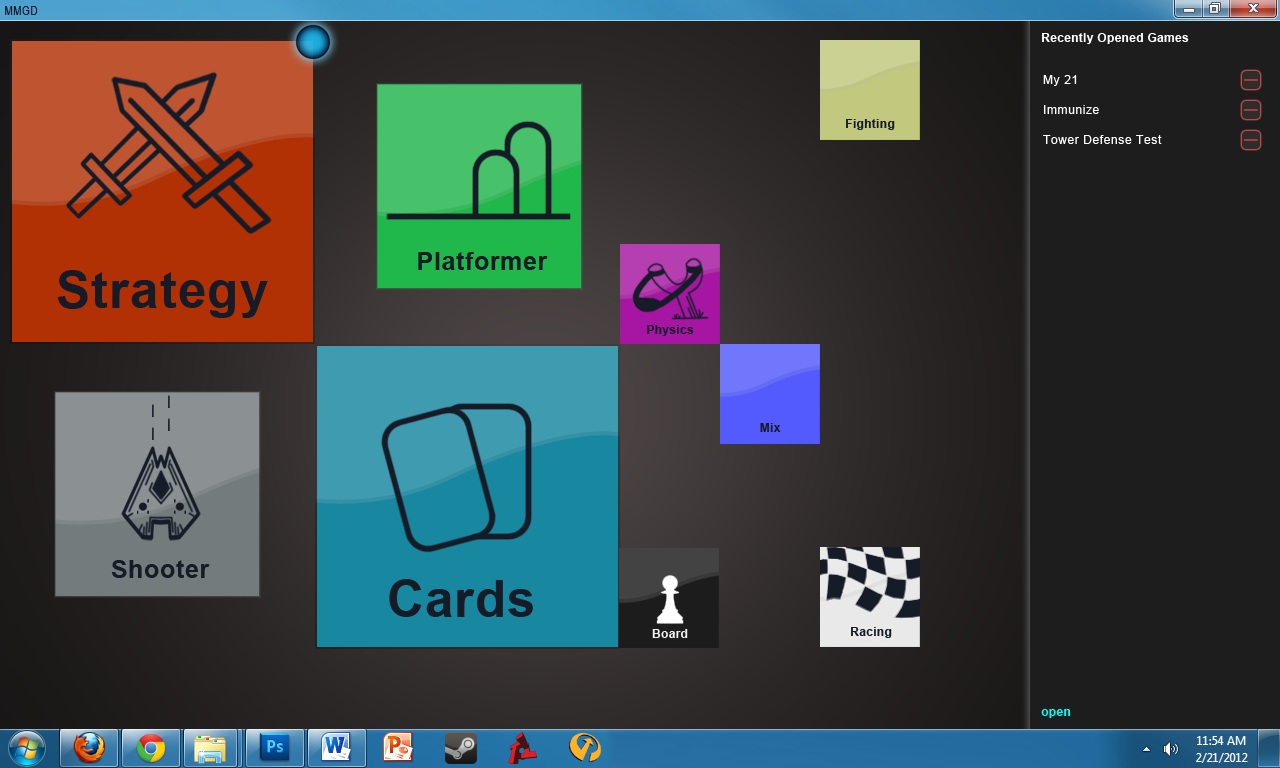
<style>
.page{position:relative;width:1280px;height:768px}
.page>*{position:absolute;margin:0}
.t1{font:12px "ArialNarrow";letter-spacing:0.05em;color:#151b27}
.t2{font:12px "Arial-BoldMT";letter-spacing:0.025em;color:#ffffff}
.t3{font:12px/30px "ArialMT";letter-spacing:0.05em;color:#ffffff}
.t4{font:25px "Arial-BoldMT";letter-spacing:0.025em;color:#151b27}
.t5{font:50.6px "Arial-BoldMT";letter-spacing:0.025em;color:#151b27}
.t6{font:12px "Arial-BoldMT";letter-spacing:0.025em;color:#151b27}
.t7{font:12px "Arial-BoldMT";letter-spacing:0.025em;color:#f1f1f1}
.t8{font:12px "Arial-BoldMT";letter-spacing:0.025em;color:#00fff6}
</style>
<div class="page">
<p class="t1" style="left:5px;top:6px;width:33px;height:9px">MMGD</p>
<p class="t2" style="left:1042px;top:33px;width:147px;height:11px">Recently Opened Games</p>
<p class="t3" style="left:1043px;top:75px;width:119px;height:69px">My 21<br>Immunize<br>Tower Defense Test</p>
<p class="t4" style="left:418px;top:252px;width:130px;height:18px">Platformer</p>
<p class="t5" style="left:57px;top:270px;width:211px;height:48px">Strategy</p>
<p class="t6" style="left:647px;top:325px;width:47px;height:11px">Physics</p>
<p class="t4" style="left:111px;top:560px;width:99px;height:18px">Shooter</p>
<p class="t5" style="left:389px;top:579px;width:144px;height:38px">Cards</p>
<p class="t7" style="left:652px;top:629px;width:36px;height:9px">Board</p>
<p class="t6" style="left:851px;top:627px;width:41px;height:11px">Racing</p>
<p class="t8" style="left:1041px;top:709px;width:30px;height:9px">open</p>
</div>
